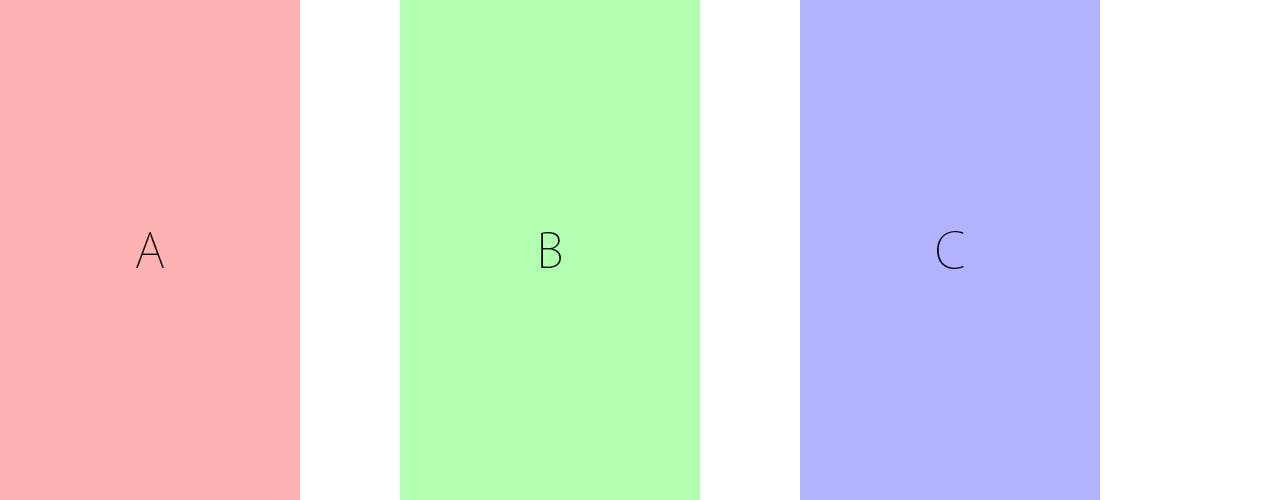
<style>
.page{position:relative;width:1268px;height:500px;background:#ffffff}
.page>*{position:absolute;margin:0}
.t1{font:48px "KozGoPro-ExtraLight";color:#000000}
</style>
<div class="page">
<p class="t1" style="left:136px;top:232px;width:28px;height:36px">A</p>
<p class="t1" style="left:541px;top:232px;width:20px;height:36px">B</p>
<p class="t1" style="left:937px;top:231px;width:27px;height:38px">C</p>
</div>
